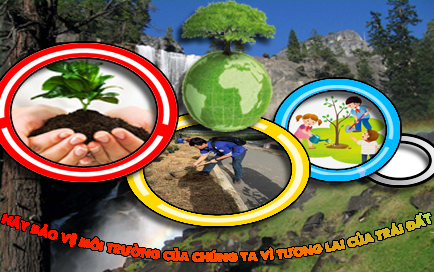
<style>
.page{position:relative;width:434px;height:272px}
.page>*{position:absolute;margin:0}
.t1{font:12.6px "SVN-ALoveOfThunder"}
.t2{font:12.6px "SVN-Kimberley"}
</style>
<div class="page">
<p class="t1" style="left:1px;top:213px;width:430px;height:49px;text-align:center">HÃY BẢO VỆ MÔI TRƯỜNG CỦA CHÚNG TA VÌ TƯƠNG LAI CỦA TRÁI ĐẤ<span class="t2">T</span></p>
</div>
